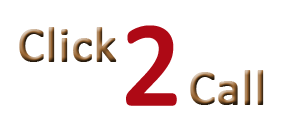
<style>
.page{position:relative;width:289px;height:116px;background:#ffffff}
.page>*{position:absolute;margin:0}
.t1{font:50px "Calibri";font-weight:bold}
.t2{font:119.9px "Calibri";color:#ae0915;font-weight:bold}
</style>
<div class="page">
<p class="t1" style="left:19px;top:27px;width:98px;height:35px">Click</p>
<p class="t2" style="left:126px;top:25px;width:51px;height:81px">2</p>
<p class="t1" style="left:190px;top:70px;width:74px;height:35px">Call</p>
</div>
